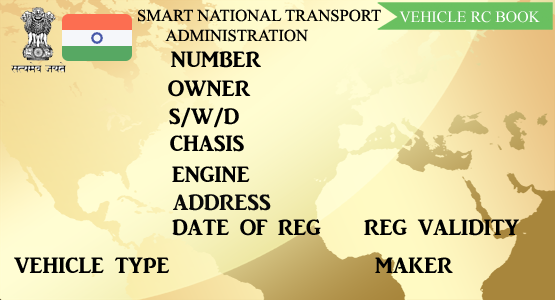
<style>
.page{position:relative;width:555px;height:300px}
.page>*{position:absolute;margin:0}
.t1{font:16.7px "TimesNewRomanPSMT";color:#010101}
.t2{font:15.8px "TimesNewRomanPSMT";color:#ffffff}
.t3{font:22.9px "ARJULIAN";color:#000000}
.t4{font:22.9px "ARJULIAN";color:#0a0a0a}
</style>
<div class="page">
<p class="t1" style="left:138px;top:9px;width:243px;height:13px">SMART NATIONAL TRANSPORT</p>
<p class="t2" style="left:399px;top:11px;width:141px;height:12px">VEHICLE RC BOOK</p>
<p class="t1" style="left:165px;top:29px;width:143px;height:13px">ADMINISTRATION</p>
<p class="t3" style="left:171px;top:51px;width:90px;height:17px">NUMBER</p>
<p class="t3" style="left:168px;top:80px;width:83px;height:17px">OWNER</p>
<p class="t3" style="left:169px;top:107px;width:70px;height:21px">S/W/D</p>
<p class="t3" style="left:170px;top:135px;width:74px;height:17px">CHASIS</p>
<p class="t3" style="left:172px;top:166px;width:78px;height:17px">ENGINE</p>
<p class="t4" style="left:173px;top:194px;width:98px;height:17px">ADDRESS</p>
<p class="t3" style="left:172px;top:219px;width:347px;height:17px">DATE OF REG    REG VALIDITY</p>
<p class="t3" style="left:14px;top:257px;width:439px;height:16px">VEHICLE TYPE                   MAKER</p>
</div>
